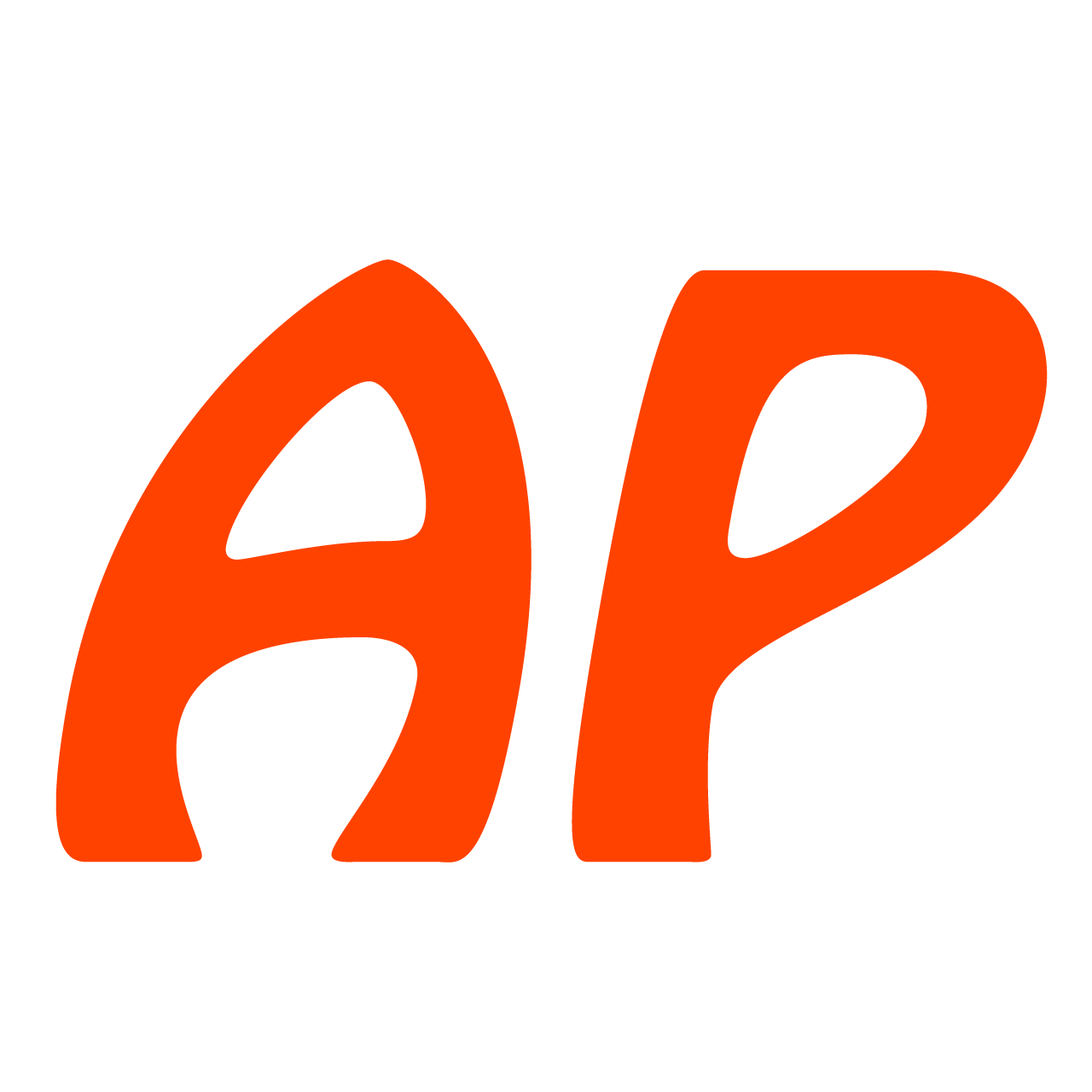
<style>
.page{position:relative;width:1092px;height:1092px;background:#ffffff}
.page>*{position:absolute;margin:0}
.t1{font:710.9px "HoboStd";letter-spacing:0.01em;color:#ff4200;font-style:italic}
</style>
<div class="page">
<p class="t1" style="left:55px;top:259px;width:993px;height:603px">AP</p>
</div>
